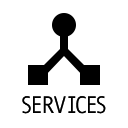
<style>
.page{position:relative;width:128px;height:128px;background:#ffffff}
.page>*{position:absolute;margin:0}
.t1{font:24px "MonoSpatial";color:#000000}
</style>
<div class="page">
<p class="t1" style="left:22px;top:96px;width:84px;height:18px">SERVICES</p>
</div>
